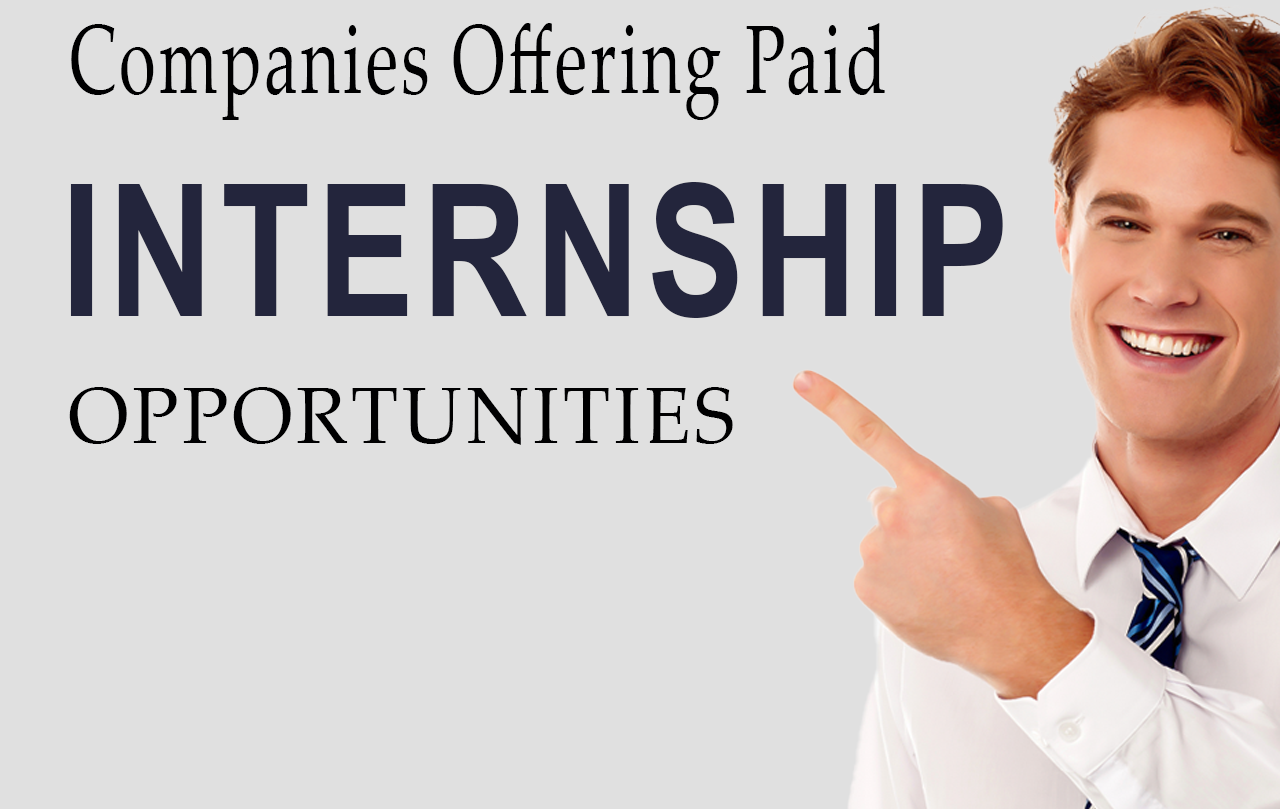
<style>
.page{position:relative;width:1280px;height:809px;background:#e0e0e0}
.page>*{position:absolute;margin:0}
.t1{font:97.1px "PalatinoLinotype-Roman";letter-spacing:0.05em;color:#000001;scale:0.69 1}
.t2{font:183.5px "Arial-BoldMT";letter-spacing:0.05em;color:#23253c;scale:0.79 1}
.t3{font:80.1px "PalatinoLinotype-Roman";letter-spacing:0.05em;color:#000001;scale:0.96 1}
</style>
<div class="page">
<p class="t1" style="left:71px;top:23px;width:814px;height:97px">Companies Offering Paid</p>
<p class="t2" style="left:70px;top:182px;width:933px;height:136px">INTERNSHIP</p>
<p class="t3" style="left:69px;top:387px;width:664px;height:58px">OPPORTUNITIES</p>
</div>
